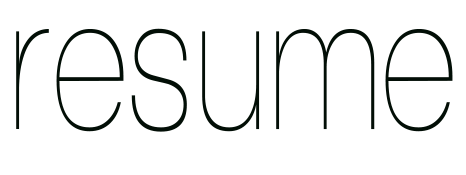
<style>
.page{position:relative;width:466px;height:175px;background:#ffffff}
.page>*{position:absolute;margin:0}
.t1{font:200px "WalkwayCondensed";color:#020e06}
</style>
<div class="page">
<p class="t1" style="left:16px;top:28px;width:437px;height:104px">resume</p>
</div>
